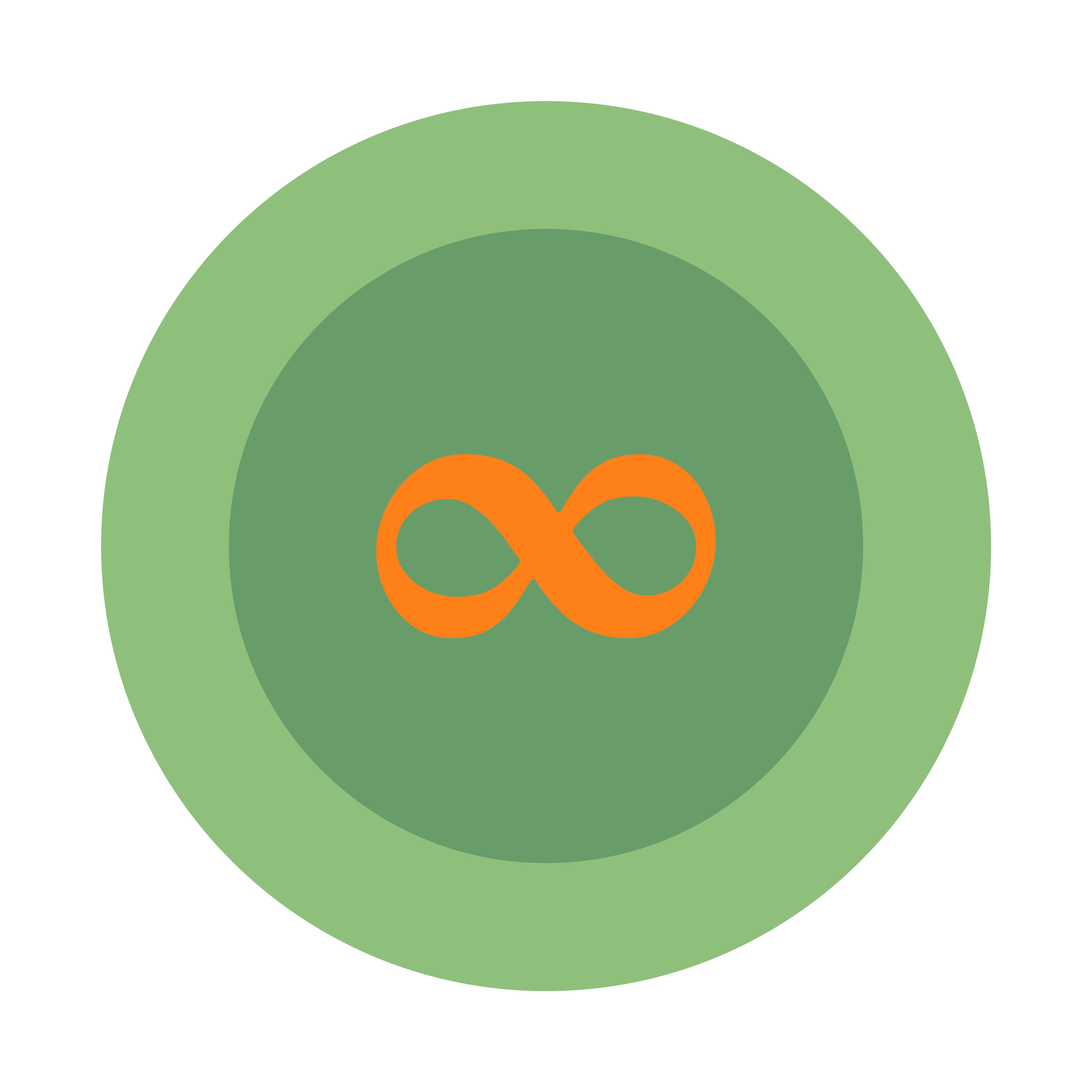
<style>
.page{position:relative;width:1092px;height:1092px;background:#ffffff}
.page>*{position:absolute;margin:0}
.t1{font:444.3px "EBGaramondRoman-Bold";color:#fe8019}
</style>
<div class="page">
<p class="t1" style="left:376px;top:454px;width:340px;height:184px">∞</p>
</div>
